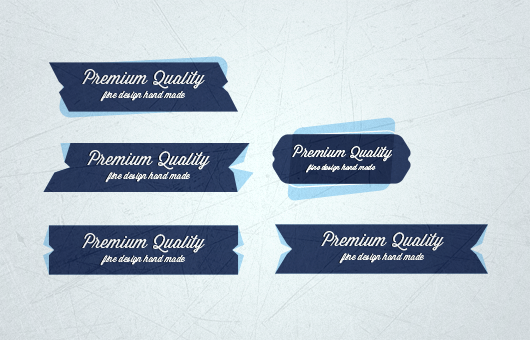
<style>
.page{position:relative;width:530px;height:340px}
.page>*{position:absolute;margin:0}
.t1{font:17.3px "WisdomScriptAI";color:#f5f5f5}
.t2{font:9.2px "WisdomScriptAI";color:#f5f5f5}
.t3{font:14.1px "WisdomScriptAI";color:#f5f5f5}
.t4{font:7.4px "WisdomScriptAI";color:#f5f5f5}
</style>
<div class="page">
<p class="t1" style="left:82px;top:69px;width:123px;height:20px">Premium Quality</p>
<p class="t2" style="left:100px;top:91px;width:85px;height:11px">fine design hand made</p>
<p class="t1" style="left:87px;top:150px;width:123px;height:20px">Premium Quality</p>
<p class="t3" style="left:292px;top:144px;width:100px;height:18px">Premium Quality</p>
<p class="t2" style="left:105px;top:172px;width:85px;height:11px">fine design hand made</p>
<p class="t4" style="left:306px;top:164px;width:70px;height:9px">fine design hand made</p>
<p class="t1" style="left:82px;top:233px;width:123px;height:20px">Premium Quality</p>
<p class="t1" style="left:321px;top:231px;width:123px;height:20px">Premium Quality</p>
<p class="t2" style="left:100px;top:255px;width:85px;height:11px">fine design hand made</p>
<p class="t2" style="left:339px;top:253px;width:85px;height:11px">fine design hand made</p>
</div>
